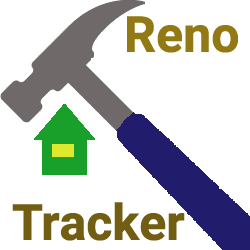
<style>
.page{position:relative;width:250px;height:250px;background:#ffffff}
.page>*{position:absolute;margin:0}
.t1{font:50px "Heebo-Bold";color:#937913}
.t2{font:50px "Heebo-Bold";color:#715e13}
</style>
<div class="page">
<p class="t1" style="left:127px;top:16px;width:111px;height:37px">Reno</p>
<p class="t2" style="left:12px;top:202px;width:173px;height:39px">Tracker</p>
</div>
